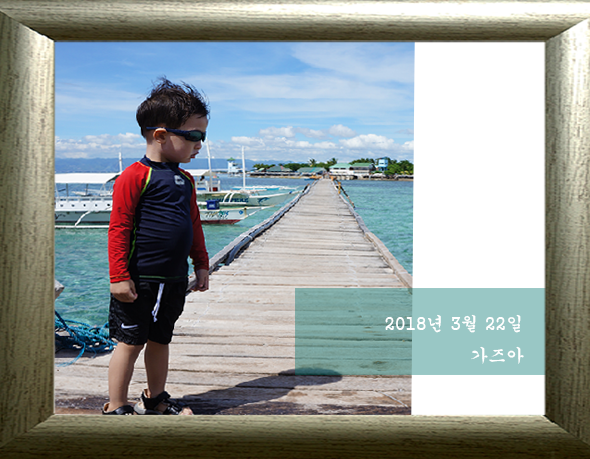
<style>
.page{position:relative;width:590px;height:459px}
.page>*{position:absolute;margin:0}
.t1{font:18px "Gungsuh";color:#ffffff}
</style>
<div class="page">
<p class="t1" style="left:385px;top:314px;width:139px;height:50px;text-align:right">2018년 3월 22일 <br>가즈아</p>
</div>
